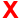
<style>
.page{position:relative;width:20px;height:20px;background:#ffffff}
.page>*{position:absolute;margin:0}
.t1{font:24px "Arial-BoldMT";color:#ff0000}
</style>
<div class="page">
<p class="t1" style="left:2px;top:1px;width:17px;height:17px">X</p>
</div>
